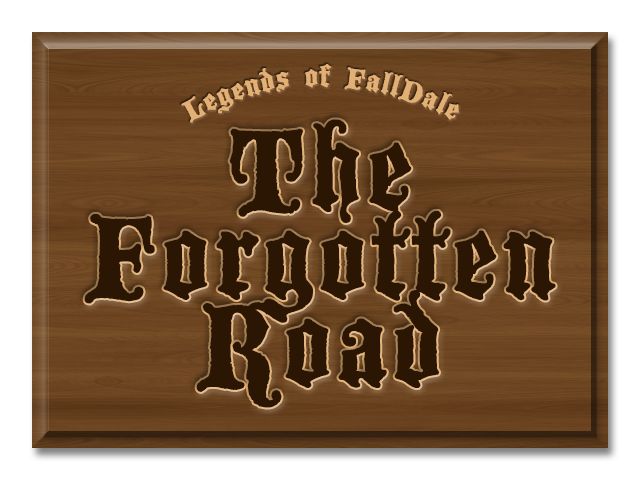
<style>
.page{position:relative;width:640px;height:480px}
.page>*{position:absolute;margin:0}
.t1{font:32px/64px "BlackwoodCastle";letter-spacing:0.025em;color:#e2b074}
.t2{font:128px/88px "BlackwoodCastle";letter-spacing:0.025em;color:#2b1603}
</style>
<div class="page">
<p class="t1" style="left:181px;top:64px;width:278px;height:59px;text-align:center">Legends of FallDale</p>
<p class="t2" style="left:84px;top:119px;width:472px;height:289px;text-align:center">The<br>Forgotten<br>Road</p>
</div>
